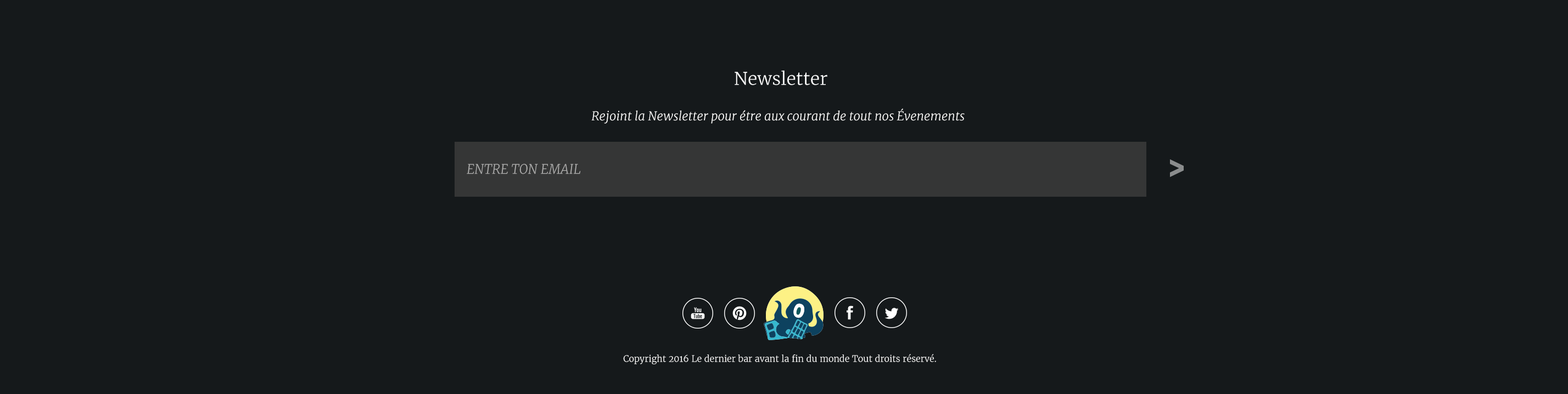
<style>
.page{position:relative;width:1568px;height:394px;background:#15191b}
.page>*{position:absolute;margin:0}
.t1{font:12.2px "Merriweather-LightItalic";color:#fffffe}
.t2{font:13.1px "Merriweather-LightItalic";color:#aeaead}
.t3{font:8.8px "Merriweather-Light";color:#ffffff}
</style>
<div class="page">
<p class="t1" style="left:591px;top:108px;width:374px;height:16px">Rejoint la Newsletter pour étre aux courant de tout nos Évenements</p>
<p class="t2" style="left:467px;top:164px;width:114px;height:10px">ENTRE TON EMAIL</p>
<p class="t3" style="left:623px;top:354px;width:313px;height:10px">Copyright 2016 Le dernier bar avant la fin du monde Tout droits réservé.</p>
</div>
